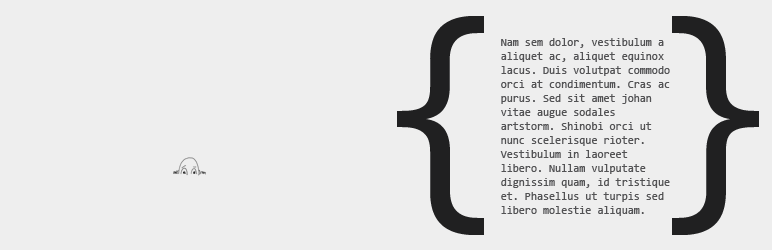
<style>
.page{position:relative;width:772px;height:250px;background:#eeeeee}
.page>*{position:absolute;margin:0}
.t1{font:242px "Consolas";letter-spacing:0.11em;color:#202021;text-transform:uppercase}
.t2{font:11px/14px "Consolas";color:#525254}
</style>
<div class="page">
<p class="t1" style="left:397px;top:16px;width:87px;height:219px">{</p>
<p class="t1" style="left:672px;top:16px;width:87px;height:219px">}</p>
<p class="t2" style="left:500px;top:38px;width:170px;height:178px">Nam sem dolor, vestibulum a aliquet ac, aliquet equinox lacus. Duis volutpat commodo orci at condimentum. Cras ac purus. Sed sit amet johan vitae augue sodales artstorm. Shinobi orci ut nunc scelerisque rioter. Vestibulum in laoreet libero. Nullam vulputate dignissim quam, id tristique et. Phasellus ut turpis sed libero molestie aliquam.</p>
</div>
